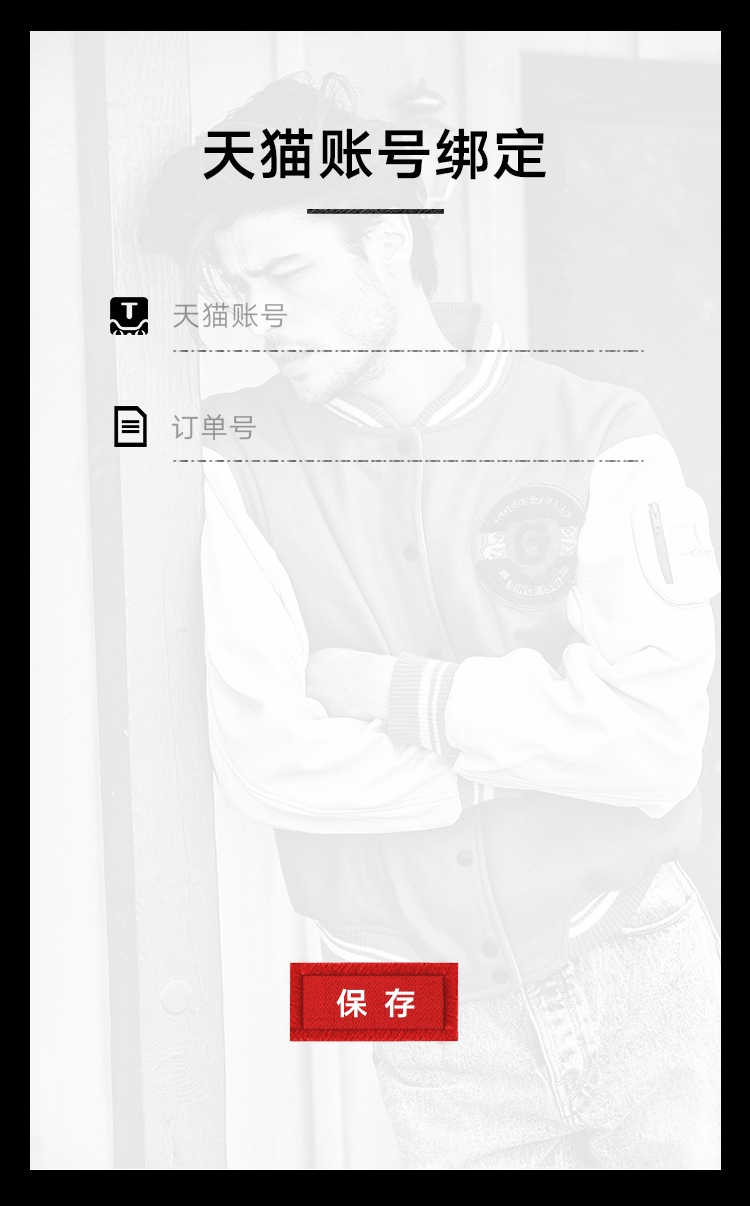
<style>
.page{position:relative;width:750px;height:1206px}
.page>*{position:absolute;margin:0}
.t1{font:56px "HYQiHei-GZS";letter-spacing:0.04em;color:#000000}
.t2{font:28px "HYQiHei-EZS";letter-spacing:0.04em;color:#9d9d9d}
.t3{font:28px "HYQiHei-EZS";letter-spacing:0.04em;color:#959595}
</style>
<div class="page">
<p class="t1" style="left:203px;top:127px;width:343px;height:53px">天猫账号绑定</p>
<p class="t2" style="left:173px;top:302px;width:114px;height:26px">天猫账号</p>
<p class="t3" style="left:172px;top:414px;width:84px;height:26px">订单号</p>
</div>
